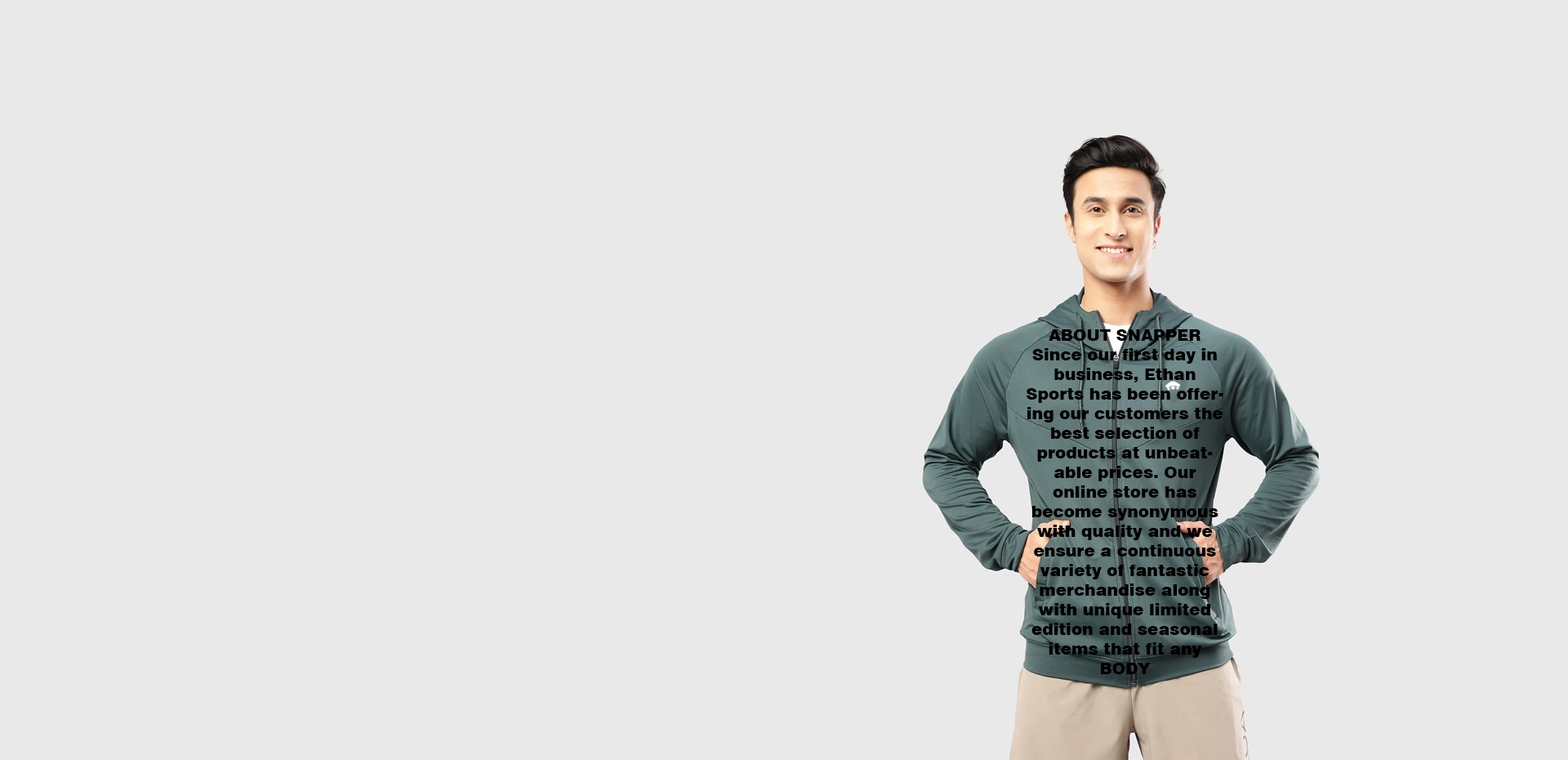
<style>
.page{position:relative;width:1568px;height:760px;background:#e9e9e9}
.page>*{position:absolute;margin:0}
.t1{font:16.3px "Swiss721BT-Black";color:#000000}
</style>
<div class="page">
<p class="t1" style="left:1027px;top:329px;width:196px;height:345px;text-align:center">ABOUT SNAPPER <br>Since our first day in business, Ethan Sports has been offering our customers the best selection of products at unbeatable prices. Our online store has become synonymous with quality and we ensure a continuous variety of fantastic merchandise along with unique limited edition and seasonal items that fit any <br>BODY</p>
</div>
